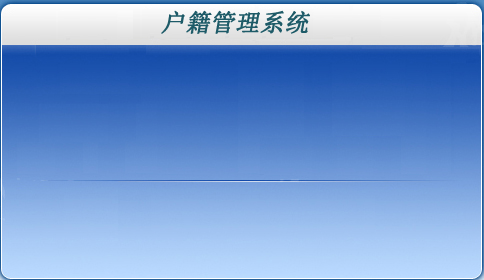
<style>
.page{position:relative;width:484px;height:280px}
.page>*{position:absolute;margin:0}
.t1{font:24px "SimSun";color:#1e5b68;font-weight:bold;font-style:italic}
</style>
<div class="page">
<p class="t1" style="left:161px;top:10px;width:149px;height:24px">户籍管理系统</p>
</div>
